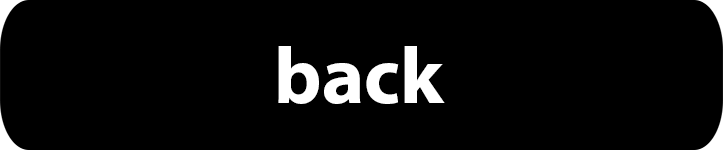
<style>
.page{position:relative;width:723px;height:150px;background:#000000}
.page>*{position:absolute;margin:0}
.t1{font:80px "MyriadPro-Bold";color:#ffffff}
</style>
<div class="page">
<p class="t1" style="left:278px;top:46px;width:167px;height:58px">back</p>
</div>
